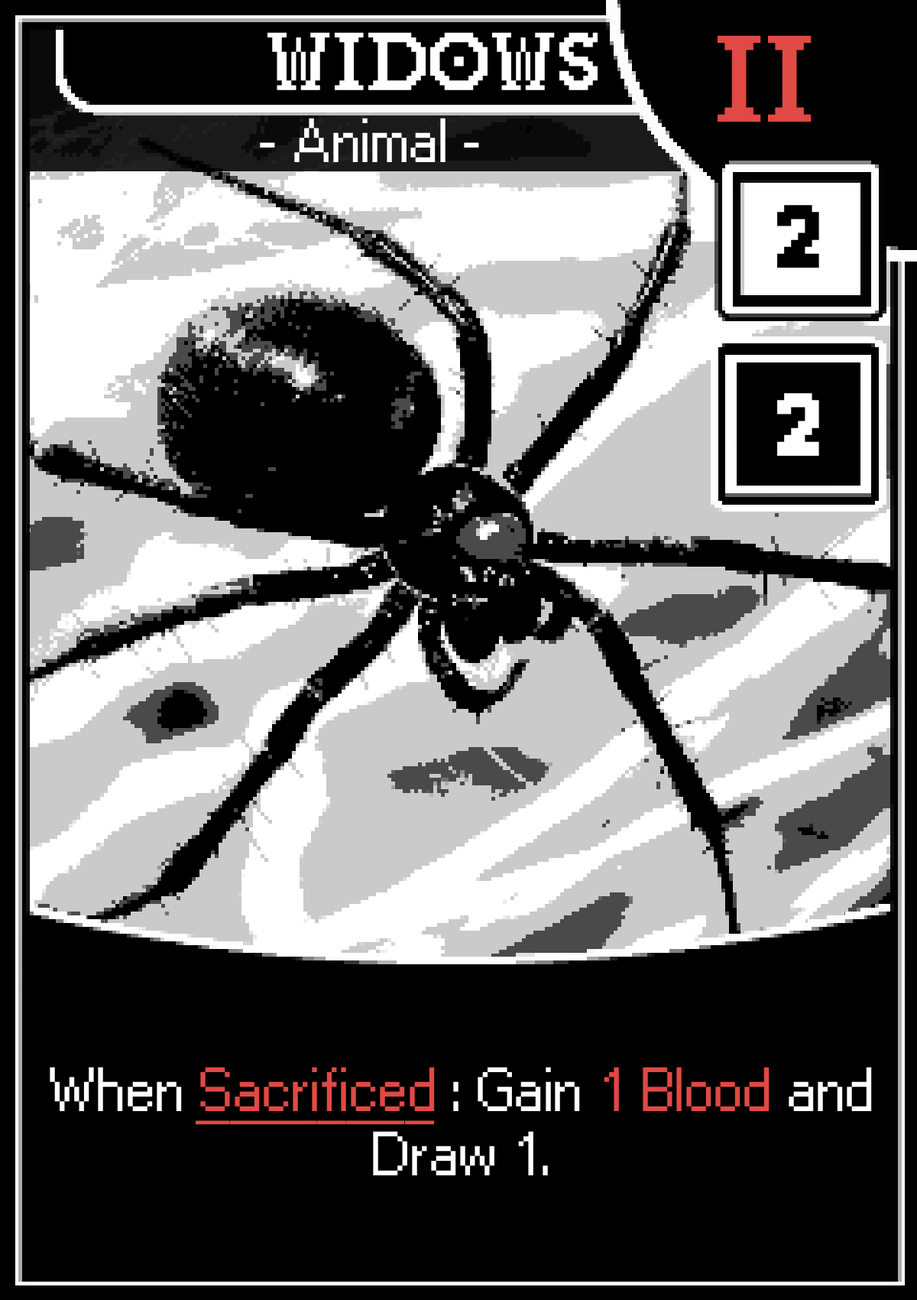
<style>
.page{position:relative;width:917px;height:1300px;background:#000000}
.page>*{position:absolute;margin:0}
.t1{font:76.5px "GallaeciaForte";color:#ffffff}
.t2{font:114.7px "GallaeciaForte";color:#e04944}
.t3{font:53.5px "Ari-W9500-Regular";color:#ffffff}
.t4{font:76.5px "AriW9500-Condensed-Display";color:#000000}
.t5{font:76.5px "AriW9500-Condensed-Display";color:#ffffff}
.t6{font:53.5px "Ari-W9500-Regular";color:#e04944;text-decoration:underline}
.t7{font:53.5px "Ari-W9500-Regular";color:#e04944}
</style>
<div class="page">
<p class="t1" style="left:268px;top:32px;width:330px;height:58px">Widows</p>
<p class="t2" style="left:718px;top:35px;width:94px;height:87px">II</p>
<p class="t3" style="left:260px;top:118px;width:219px;height:44px">- Animal -</p>
<p class="t4" style="left:778px;top:205px;width:42px;height:63px">2</p>
<p class="t5" style="left:778px;top:393px;width:42px;height:63px">2</p>
<p class="t3" style="left:50px;top:1067px;width:822px;height:108px;text-align:center">When <span class="t6">Sacrificed </span>: Gain <span class="t7">1 Blood </span>and Draw 1.</p>
</div>
